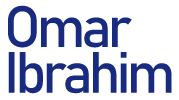
<style>
.page{position:relative;width:179px;height:100px;background:#ffffff}
.page>*{position:absolute;margin:0}
.t1{font:57.4px/45.9px "Bahnschrift";letter-spacing:-0.075em;color:#192b80}
</style>
<div class="page">
<p class="t1" style="left:8px;top:5px;width:164px;height:89px">Omar<br>Ibrahim</p>
</div>
